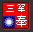
<style>
.page{position:relative;width:33px;height:32px;background:#f20000}
.page>*{position:absolute;margin:0}
.t1{font:10.4px "SimSun";color:#ffffff}
.t2{font:11.7px "SimSun";color:#ffffff}
</style>
<div class="page">
<p class="t1" style="left:6px;top:4px;width:19px;height:8px">三军</p>
<p class="t2" style="left:16px;top:15px;width:11px;height:12px">奉</p>
</div>
